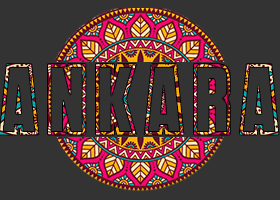
<style>
.page{position:relative;width:280px;height:200px;background:#333333}
.page>*{position:absolute;margin:0}
.t1{font:87px "VanchromeOutline-Regular";letter-spacing:0.12em}
</style>
<div class="page">
<p class="t1" style="left:0px;top:64px;width:279px;height:71px">ANKARA</p>
</div>
